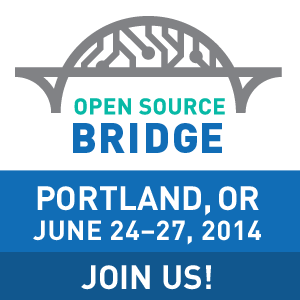
<style>
.page{position:relative;width:300px;height:300px;background:#ffffff}
.page>*{position:absolute;margin:0}
.t1{font:22.4px "DIN-Bold";letter-spacing:0.02em;color:#08b9a6}
.t2{font:41.6px "DIN-Black";letter-spacing:0.06em;color:#116db6}
.t3{font:41.6px "DIN-Black";letter-spacing:0.02em;color:#116db6}
.t4{font:41.6px "DIN-Black";letter-spacing:0.03em;color:#116db6}
.t5{font:27.2px/30.2px "DIN-Bold";letter-spacing:0.02em;color:#ffffff}
.t6{font:33.2px/30.2px "DIN-Bold";color:#ffffff}
.t7{font:33.2px "DIN-Bold";color:#ffffff}
</style>
<div class="page">
<p class="t1" style="left:74px;top:98px;width:151px;height:17px">OPEN SOURCE</p>
<p class="t2" style="left:73px;top:123px;width:149px;height:30px"><span class="t3">B</span>RI<span class="t4">D</span><span class="t3">GE</span></p>
<p class="t5" style="left:33px;top:186px;width:228px;height:59px;text-align:center"><span class="t6">PORTLAND, OR<br></span>JUNE 24–27, 2014</p>
<p class="t7" style="left:81px;top:265px;width:130px;height:25px">JOIN US!</p>
</div>
